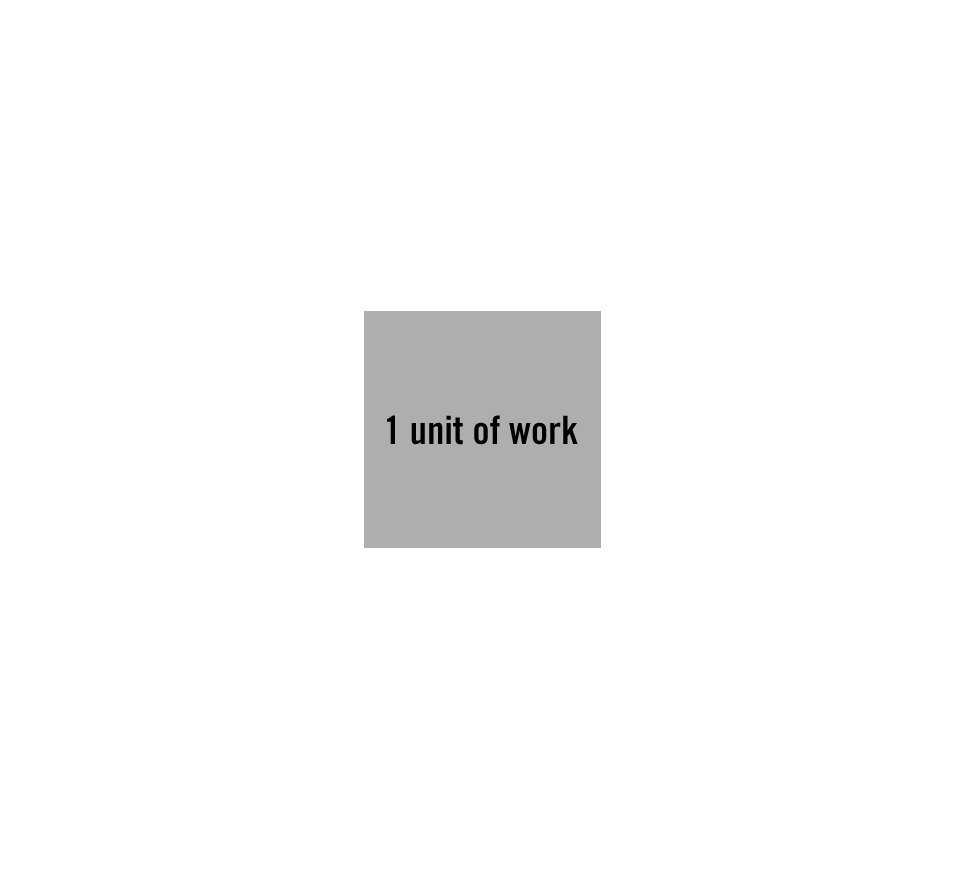
<style>
.page{position:relative;width:964px;height:878px;background:#ffffff}
.page>*{position:absolute;margin:0}
.t1{font:39px "TradeGothicLTStd-BdCn20";color:#000000}
</style>
<div class="page">
<p class="t1" style="left:387px;top:415px;width:191px;height:30px">1 unit of work</p>
</div>
